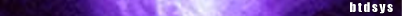
<style>
.page{position:relative;width:402px;height:16px}
.page>*{position:absolute;margin:0}
.t1{font:12.3px "Impact";letter-spacing:0.1em;color:#ffffff;scale:1.09 1}
</style>
<div class="page">
<p class="t1" style="left:350px;top:2px;width:43px;height:12px">btdsys</p>
</div>
